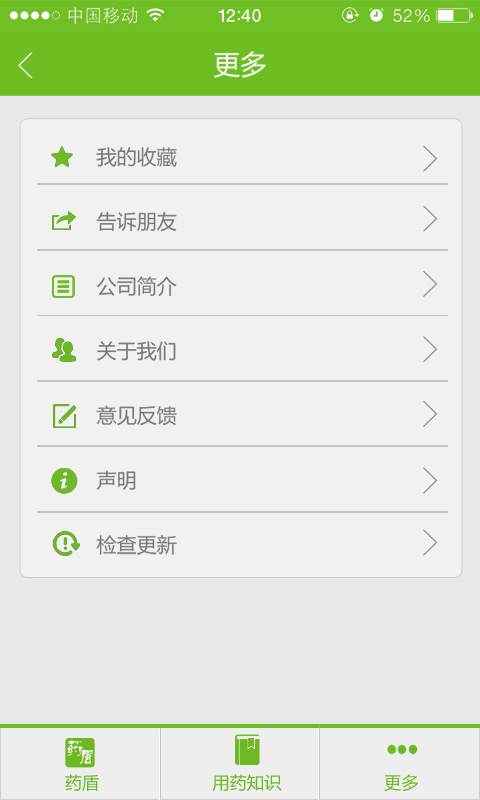
<style>
.page{position:relative;width:480px;height:800px;background:#f1f1f1}
.page>*{position:absolute;margin:0}
.t1{font:26.7px "MicrosoftYaHei";color:#ffffff}
.t2{font:20px/64.6px "MicrosoftYaHei";color:#777777}
.t3{font:17.3px "MicrosoftYaHei";color:#6cb825}
</style>
<div class="page">
<p class="t1" style="left:213px;top:51px;width:53px;height:27px">更多</p>
<p class="t2" style="left:96px;top:147px;width:81px;height:408px">我的收藏<br>告诉朋友<br>公司简介<br>关于我们<br>意见反馈<br>声明<br>检查更新</p>
<p class="t3" style="left:65px;top:774px;width:353px;height:18px">药盾                      用药知识                    更多</p>
</div>
